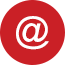
<style>
.page{position:relative;width:65px;height:65px;background:#ca2026}
.page>*{position:absolute;margin:0}
.t1{font:35px "ArialMT";color:#ffffff}
</style>
<div class="page">
<p class="t1" style="left:16px;top:16px;width:33px;height:34px">@</p>
</div>
